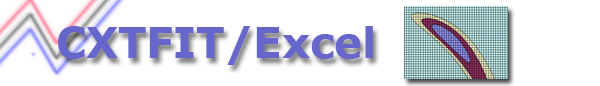
<style>
.page{position:relative;width:600px;height:86px;background:#ffffff}
.page>*{position:absolute;margin:0}
.t1{font:41.7px "Verdana-Bold";color:#6666cc}
</style>
<div class="page">
<p class="t1" style="left:58px;top:26px;width:315px;height:39px">CXTFIT/Excel</p>
</div>
